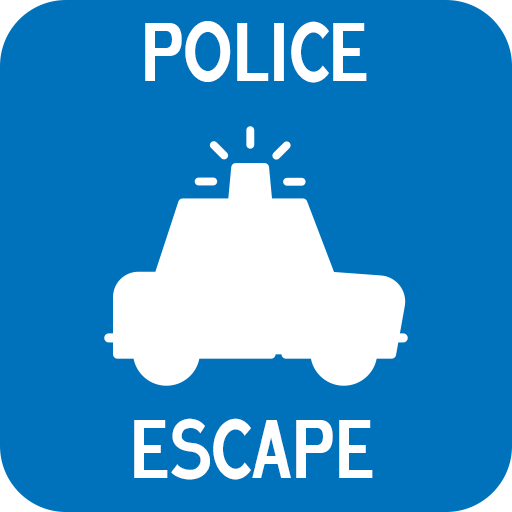
<style>
.page{position:relative;width:512px;height:512px;background:#0072bc}
.page>*{position:absolute;margin:0}
.t1{font:82.5px "GinandSoda";color:#ffffff}
</style>
<div class="page">
<p class="t1" style="left:145px;top:21px;width:222px;height:62px">POLICE</p>
<p class="t1" style="left:134px;top:418px;width:239px;height:62px">ESCAPE</p>
</div>
